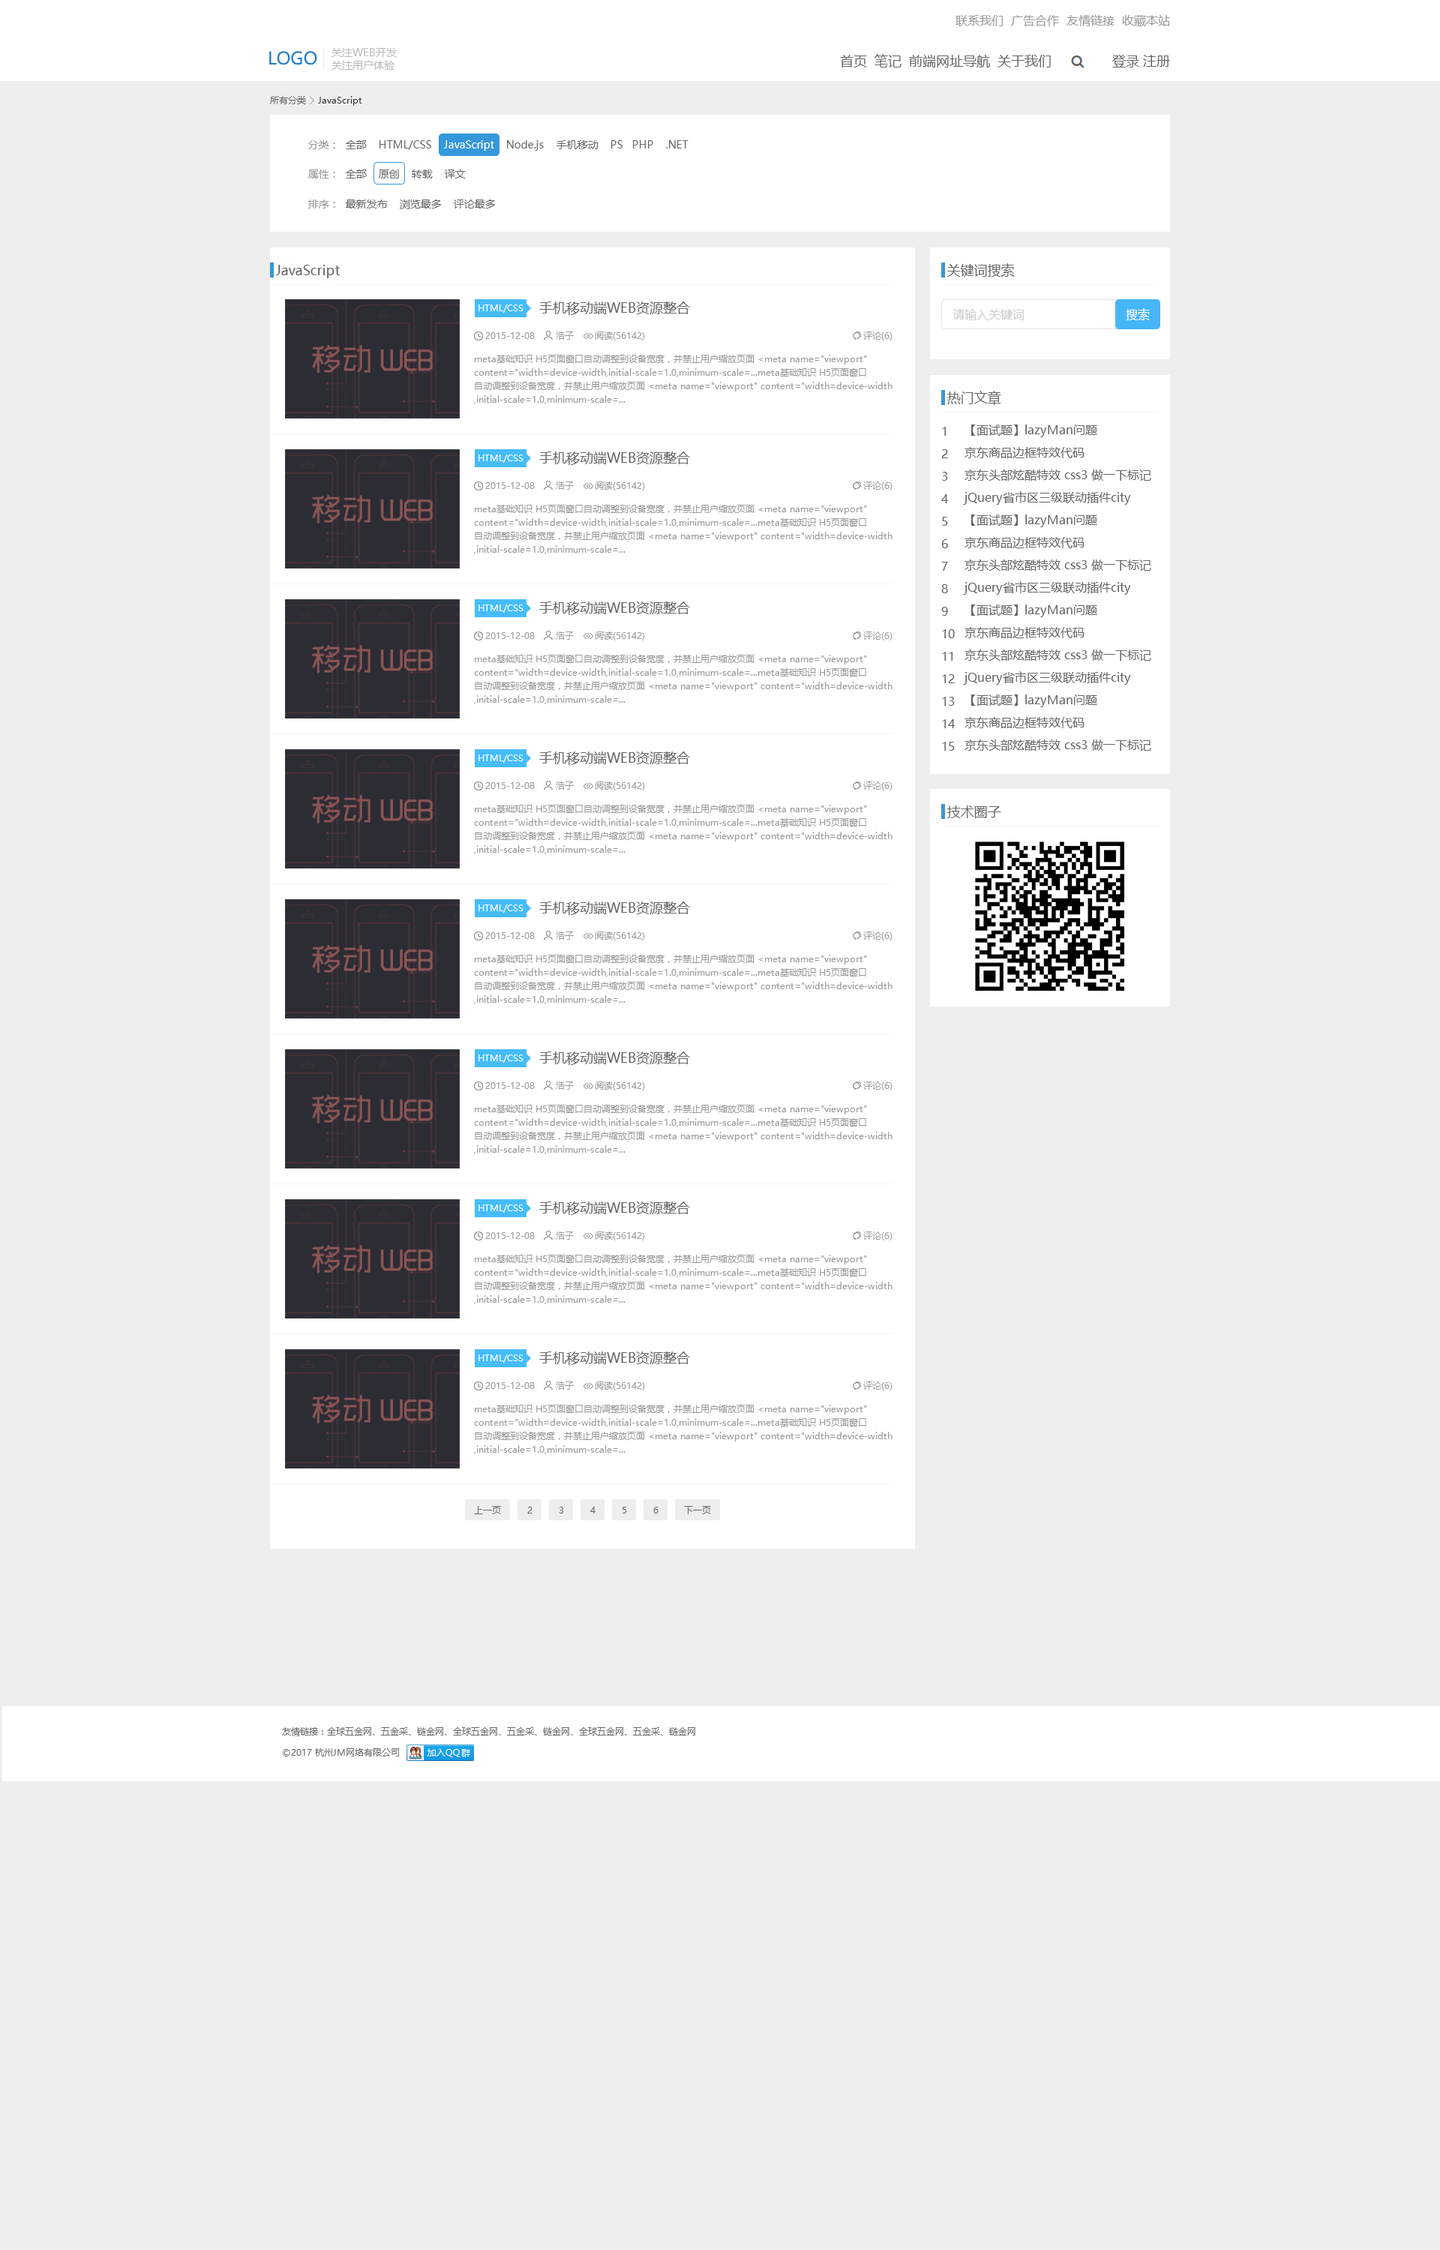
<style>
.page{position:relative;width:1440px;height:2250px;background:#eeeeee}
.page>*{position:absolute;margin:0}
.t1{font:12px "MicrosoftYaHei";color:#999999}
.t2{font:17.3px "MicrosoftYaHei";color:#1a7cd0}
.t3{font:10.5px "MicrosoftYaHei";color:#bbbbbb}
.t4{font:13.5px "MicrosoftYaHei";color:#666666}
.t5{font:9px "MicrosoftYaHei";color:#666666}
.t6{font:9px "MicrosoftYaHei";color:#333333}
.t7{font:10.5px "MicrosoftYaHei";color:#666666}
.t8{font:10.5px "MicrosoftYaHei";color:#999999}
.t9{font:10.5px "MicrosoftYaHei";color:#ffffff}
.t10{font:9px "MicrosoftYaHei";color:#ffffff}
.t11{font:12px "MicrosoftYaHei";color:#cccccc}
.t12{font:12px "MicrosoftYaHei";color:#ffffff}
.t13{font:9px "MicrosoftYaHei";color:#999999}
.t14{font:9px/13.5px "MicrosoftYaHei";color:#999999}
.t15{font:12px/22.5px "MicrosoftYaHei";color:#666666}
</style>
<div class="page">
<p class="t1" style="left:956px;top:15px;width:214px;height:11px">联系我们  广告合作  友情链接  收藏本站</p>
<p class="t2" style="left:269px;top:51px;width:48px;height:14px">LOGO</p>
<p class="t3" style="left:332px;top:48px;width:65px;height:22px">关注WEB开发 <br>关注用户体验</p>
<p class="t4" style="left:840px;top:54px;width:211px;height:14px">首页  笔记  前端网址导航  关于我们</p>
<p class="t4" style="left:1112px;top:55px;width:58px;height:13px">登录 注册</p>
<p class="t5" style="left:270px;top:96px;width:36px;height:8px">所有分类</p>
<p class="t6" style="left:318px;top:96px;width:44px;height:10px">JavaScript</p>
<p class="t7" style="left:308px;top:140px;width:380px;height:11px"><span class="t8">分类：  </span>全部    HTML/CSS    <span class="t9">JavaScript</span>    Node.js    手机移动    PS   PHP    .NET</p>
<p class="t7" style="left:308px;top:170px;width:158px;height:8px"><span class="t8">属性：  </span>全部    原创    转载    译文</p>
<p class="t7" style="left:308px;top:200px;width:187px;height:9px"><span class="t8">排序：  </span>最新发布    浏览最多    评论最多</p>
<p class="t4" style="left:275px;top:265px;width:65px;height:13px">JavaScript</p>
<p class="t4" style="left:947px;top:263px;width:68px;height:14px">关键词搜索</p>
<p class="t10" style="left:478px;top:304px;width:46px;height:9px">HTML/CSS</p>
<p class="t4" style="left:539px;top:302px;width:151px;height:13px">手机移动端WEB资源整合</p>
<p class="t11" style="left:952px;top:309px;width:72px;height:11px">请输入关键词</p>
<p class="t12" style="left:1126px;top:308px;width:24px;height:12px">搜索</p>
<p class="t13" style="left:485px;top:332px;width:160px;height:8px">2015-12-08       浩子       阅读(56142)</p>
<p class="t13" style="left:863px;top:332px;width:29px;height:8px">评论(6)</p>
<p class="t14" style="left:474px;top:355px;width:418px;height:49px">meta基础知识 H5页面窗口自动调整到设备宽度，并禁止用户缩放页面 &lt;meta name="viewport" <br>content="width=device-width,initial-scale=1.0,minimum-scale=...meta基础知识 H5页面窗口<br>自动调整到设备宽度，并禁止用户缩放页面 &lt;meta name="viewport" content="width=device-width<br>,initial-scale=1.0,minimum-scale=...</p>
<p class="t4" style="left:947px;top:391px;width:54px;height:14px">热门文章</p>
<p class="t15" style="left:963px;top:424px;width:188px;height:327px">【面试题】lazyMan问题<br>京东商品边框特效代码<br>京东头部炫酷特效 css3 做一下标记<br>jQuery省市区三级联动插件city<br>【面试题】lazyMan问题<br>京东商品边框特效代码<br>京东头部炫酷特效 css3 做一下标记<br>jQuery省市区三级联动插件city<br>【面试题】lazyMan问题<br>京东商品边框特效代码<br>京东头部炫酷特效 css3 做一下标记<br>jQuery省市区三级联动插件city<br>【面试题】lazyMan问题<br>京东商品边框特效代码<br>京东头部炫酷特效 css3 做一下标记</p>
<p class="t15" style="left:941px;top:427px;width:15px;height:324px">1<br>2<br>3<br>4<br>5<br>6<br>7<br>8<br>9<br>10<br>11<br>12<br>13<br>14<br>15</p>
<p class="t10" style="left:478px;top:454px;width:46px;height:9px">HTML/CSS</p>
<p class="t4" style="left:539px;top:452px;width:151px;height:13px">手机移动端WEB资源整合</p>
<p class="t13" style="left:485px;top:482px;width:160px;height:8px">2015-12-08       浩子       阅读(56142)</p>
<p class="t13" style="left:863px;top:482px;width:29px;height:8px">评论(6)</p>
<p class="t14" style="left:474px;top:505px;width:418px;height:49px">meta基础知识 H5页面窗口自动调整到设备宽度，并禁止用户缩放页面 &lt;meta name="viewport" <br>content="width=device-width,initial-scale=1.0,minimum-scale=...meta基础知识 H5页面窗口<br>自动调整到设备宽度，并禁止用户缩放页面 &lt;meta name="viewport" content="width=device-width<br>,initial-scale=1.0,minimum-scale=...</p>
<p class="t10" style="left:478px;top:604px;width:46px;height:9px">HTML/CSS</p>
<p class="t4" style="left:539px;top:602px;width:151px;height:13px">手机移动端WEB资源整合</p>
<p class="t13" style="left:485px;top:632px;width:160px;height:8px">2015-12-08       浩子       阅读(56142)</p>
<p class="t13" style="left:863px;top:632px;width:29px;height:8px">评论(6)</p>
<p class="t14" style="left:474px;top:655px;width:418px;height:49px">meta基础知识 H5页面窗口自动调整到设备宽度，并禁止用户缩放页面 &lt;meta name="viewport" <br>content="width=device-width,initial-scale=1.0,minimum-scale=...meta基础知识 H5页面窗口<br>自动调整到设备宽度，并禁止用户缩放页面 &lt;meta name="viewport" content="width=device-width<br>,initial-scale=1.0,minimum-scale=...</p>
<p class="t10" style="left:478px;top:754px;width:46px;height:9px">HTML/CSS</p>
<p class="t4" style="left:539px;top:752px;width:151px;height:13px">手机移动端WEB资源整合</p>
<p class="t13" style="left:485px;top:782px;width:160px;height:8px">2015-12-08       浩子       阅读(56142)</p>
<p class="t13" style="left:863px;top:782px;width:29px;height:8px">评论(6)</p>
<p class="t14" style="left:474px;top:805px;width:418px;height:49px">meta基础知识 H5页面窗口自动调整到设备宽度，并禁止用户缩放页面 &lt;meta name="viewport" <br>content="width=device-width,initial-scale=1.0,minimum-scale=...meta基础知识 H5页面窗口<br>自动调整到设备宽度，并禁止用户缩放页面 &lt;meta name="viewport" content="width=device-width<br>,initial-scale=1.0,minimum-scale=...</p>
<p class="t4" style="left:947px;top:806px;width:54px;height:12px">技术圈子</p>
<p class="t10" style="left:478px;top:904px;width:46px;height:9px">HTML/CSS</p>
<p class="t4" style="left:539px;top:902px;width:151px;height:13px">手机移动端WEB资源整合</p>
<p class="t13" style="left:485px;top:932px;width:160px;height:8px">2015-12-08       浩子       阅读(56142)</p>
<p class="t13" style="left:863px;top:932px;width:29px;height:8px">评论(6)</p>
<p class="t14" style="left:474px;top:955px;width:418px;height:49px">meta基础知识 H5页面窗口自动调整到设备宽度，并禁止用户缩放页面 &lt;meta name="viewport" <br>content="width=device-width,initial-scale=1.0,minimum-scale=...meta基础知识 H5页面窗口<br>自动调整到设备宽度，并禁止用户缩放页面 &lt;meta name="viewport" content="width=device-width<br>,initial-scale=1.0,minimum-scale=...</p>
<p class="t10" style="left:478px;top:1054px;width:46px;height:9px">HTML/CSS</p>
<p class="t4" style="left:539px;top:1052px;width:151px;height:13px">手机移动端WEB资源整合</p>
<p class="t13" style="left:485px;top:1082px;width:160px;height:8px">2015-12-08       浩子       阅读(56142)</p>
<p class="t13" style="left:863px;top:1082px;width:29px;height:8px">评论(6)</p>
<p class="t14" style="left:474px;top:1105px;width:418px;height:49px">meta基础知识 H5页面窗口自动调整到设备宽度，并禁止用户缩放页面 &lt;meta name="viewport" <br>content="width=device-width,initial-scale=1.0,minimum-scale=...meta基础知识 H5页面窗口<br>自动调整到设备宽度，并禁止用户缩放页面 &lt;meta name="viewport" content="width=device-width<br>,initial-scale=1.0,minimum-scale=...</p>
<p class="t10" style="left:478px;top:1204px;width:46px;height:9px">HTML/CSS</p>
<p class="t4" style="left:539px;top:1202px;width:151px;height:13px">手机移动端WEB资源整合</p>
<p class="t13" style="left:485px;top:1232px;width:160px;height:8px">2015-12-08       浩子       阅读(56142)</p>
<p class="t13" style="left:863px;top:1232px;width:29px;height:8px">评论(6)</p>
<p class="t14" style="left:474px;top:1255px;width:418px;height:49px">meta基础知识 H5页面窗口自动调整到设备宽度，并禁止用户缩放页面 &lt;meta name="viewport" <br>content="width=device-width,initial-scale=1.0,minimum-scale=...meta基础知识 H5页面窗口<br>自动调整到设备宽度，并禁止用户缩放页面 &lt;meta name="viewport" content="width=device-width<br>,initial-scale=1.0,minimum-scale=...</p>
<p class="t10" style="left:478px;top:1354px;width:46px;height:9px">HTML/CSS</p>
<p class="t4" style="left:539px;top:1352px;width:151px;height:13px">手机移动端WEB资源整合</p>
<p class="t13" style="left:485px;top:1382px;width:160px;height:8px">2015-12-08       浩子       阅读(56142)</p>
<p class="t13" style="left:863px;top:1382px;width:29px;height:8px">评论(6)</p>
<p class="t14" style="left:474px;top:1405px;width:418px;height:49px">meta基础知识 H5页面窗口自动调整到设备宽度，并禁止用户缩放页面 &lt;meta name="viewport" <br>content="width=device-width,initial-scale=1.0,minimum-scale=...meta基础知识 H5页面窗口<br>自动调整到设备宽度，并禁止用户缩放页面 &lt;meta name="viewport" content="width=device-width<br>,initial-scale=1.0,minimum-scale=...</p>
<p class="t5" style="left:474px;top:1506px;width:27px;height:8px">上一页</p>
<p class="t5" style="left:527px;top:1507px;width:5px;height:7px">2</p>
<p class="t5" style="left:559px;top:1507px;width:5px;height:7px">3</p>
<p class="t5" style="left:590px;top:1507px;width:6px;height:7px">4</p>
<p class="t5" style="left:622px;top:1507px;width:5px;height:7px">5</p>
<p class="t5" style="left:653px;top:1507px;width:5px;height:7px">6</p>
<p class="t5" style="left:684px;top:1506px;width:27px;height:8px">下一页</p>
<p class="t5" style="left:282px;top:1727px;width:413px;height:9px">友情链接：全球五金网、五金采、链金网、全球五金网、五金采、链金网、全球五金网、五金采、链金网</p>
<p class="t5" style="left:283px;top:1748px;width:116px;height:8px">©2017 杭州JM网络有限公司</p>
</div>
